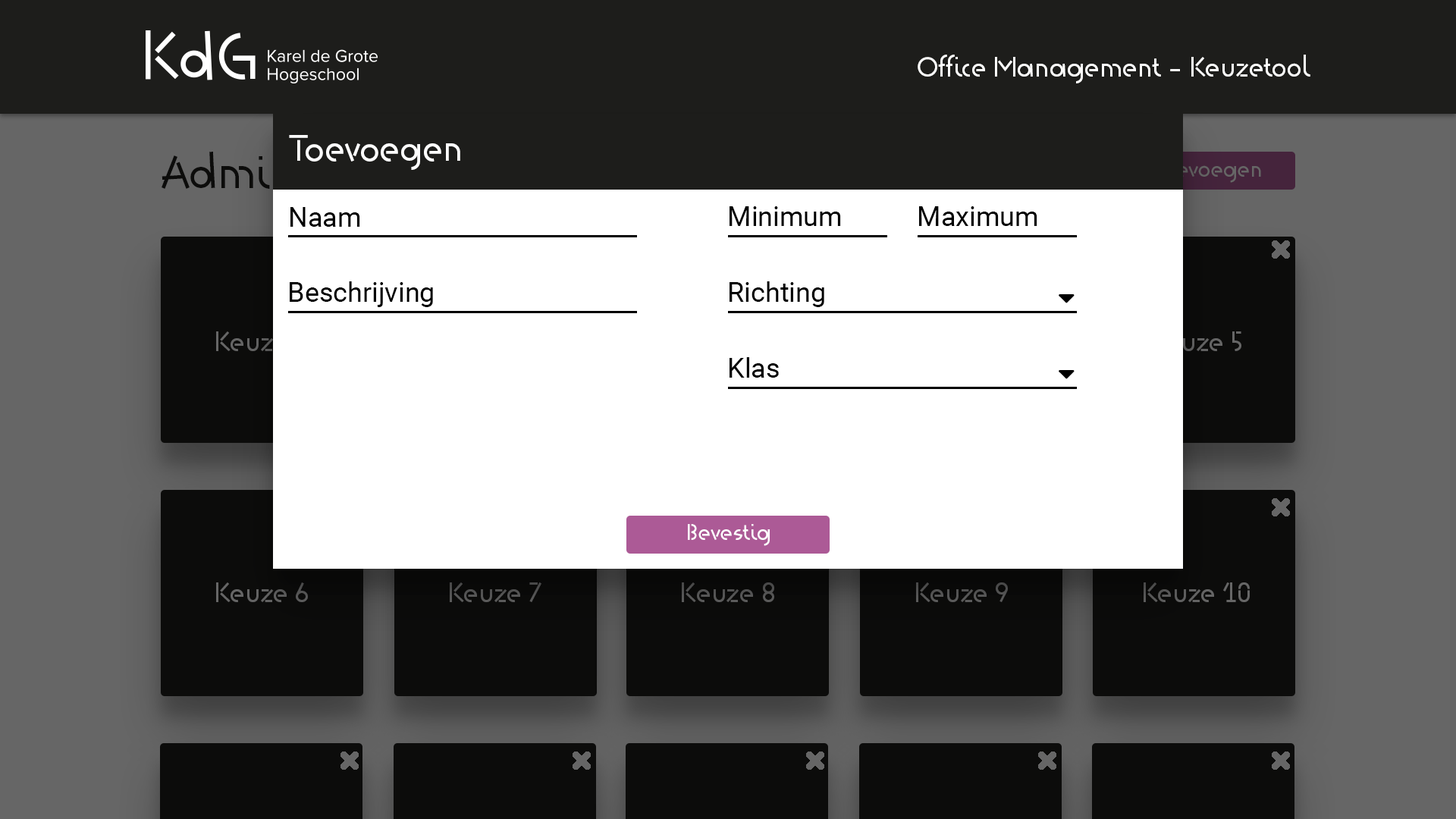
<style>
.page{position:relative;width:1456px;height:819px;background:#ffffff}
.page>*{position:absolute;margin:0}
.t1{font:27.3px "KdG-Regular";color:#fefefe}
.t2{font:36.4px "KdG-Regular";color:#fefefe}
.t3{font:22.7px "KdG-Regular"}
.t4{font:27.3px "Roboto-Regular";color:#000000}
.t5{font:22.7px "KdG-Regular";color:#fefefe}
.t6{font:27.3px "KdG-Regular";color:#626262}
.t7{font:27.3px "KdG-Regular";color:#545454}
</style>
<div class="page">
<p class="t1" style="left:918px;top:55px;width:392px;height:28px">Office Management - Keuzetool</p>
<p class="t2" style="left:289px;top:135px;width:171px;height:35px">Toevoegen</p>
<p class="t3" style="left:1091px;top:161px;width:170px;height:22px">Keuze toevoegen</p>
<p class="t4" style="left:290px;top:207px;width:70px;height:20px">Naam</p>
<p class="t4" style="left:730px;top:206px;width:111px;height:20px">Minimum</p>
<p class="t4" style="left:919px;top:206px;width:118px;height:20px">Maximum</p>
<p class="t4" style="left:290px;top:281px;width:143px;height:26px">Beschrijving</p>
<p class="t4" style="left:730px;top:281px;width:94px;height:26px">Richting</p>
<p class="t4" style="left:730px;top:357px;width:49px;height:21px">Klas</p>
<p class="t5" style="left:688px;top:524px;width:82px;height:22px">Bevestig</p>
<p class="t6" style="left:216px;top:582px;width:92px;height:20px">Keuze 6</p>
<p class="t7" style="left:450px;top:582px;width:91px;height:20px">Keuze 7</p>
<p class="t7" style="left:682px;top:582px;width:92px;height:20px">Keuze 8</p>
<p class="t7" style="left:916px;top:582px;width:92px;height:20px">Keuze 9</p>
<p class="t6" style="left:1144px;top:582px;width:106px;height:20px">Keuze 10</p>
</div>
